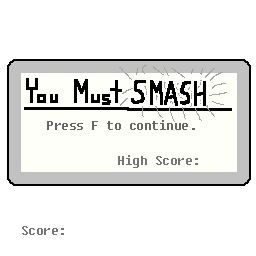
<style>
.page{position:relative;width:256px;height:256px;background:#ffffff}
.page>*{position:absolute;margin:0}
.t1{font:12px "Fixedsys";color:#666666}
.t2{font:12px "Fixedsys";color:#757575}
</style>
<div class="page">
<p class="t1" style="left:47px;top:120px;width:148px;height:10px">Press F to continue.</p>
<p class="t2" style="left:118px;top:155px;width:80px;height:13px">High Score:</p>
<p class="t2" style="left:22px;top:226px;width:42px;height:9px">Score:</p>
</div>
